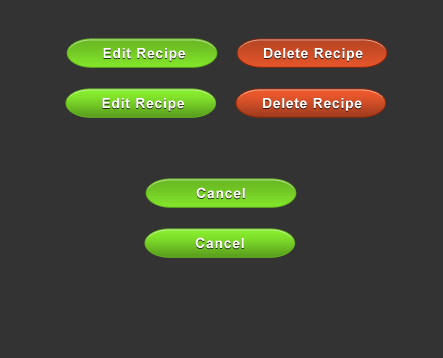
<style>
.page{position:relative;width:443px;height:358px;background:#333333}
.page>*{position:absolute;margin:0}
.t1{font:14px "Arial-BoldMT";letter-spacing:0.05em;color:#ffffff}
</style>
<div class="page">
<p class="t1" style="left:103px;top:48px;width:82px;height:13px">Edit Recipe</p>
<p class="t1" style="left:264px;top:48px;width:99px;height:13px">Delete Recipe</p>
<p class="t1" style="left:102px;top:98px;width:82px;height:13px">Edit Recipe</p>
<p class="t1" style="left:263px;top:98px;width:99px;height:13px">Delete Recipe</p>
<p class="t1" style="left:196px;top:187px;width:49px;height:12px">Cancel</p>
<p class="t1" style="left:195px;top:237px;width:49px;height:12px">Cancel</p>
</div>
